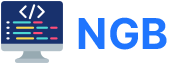
<style>
.page{position:relative;width:170px;height:64px;background:#ffffff}
.page>*{position:absolute;margin:0}
.t1{font:42.5px "Inter-Bold";color:#1f75fe}
</style>
<div class="page">
<p class="t1" style="left:78px;top:17px;width:89px;height:33px">NGB</p>
</div>
